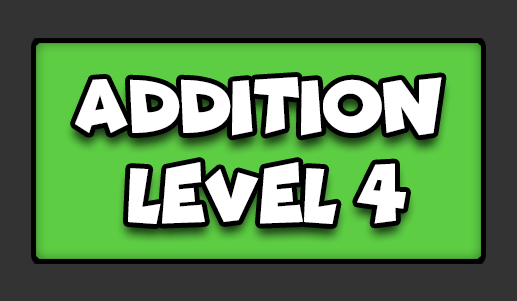
<style>
.page{position:relative;width:517px;height:301px;background:#333333}
.page>*{position:absolute;margin:0}
.t1{font:77.7px "Funhouse";color:#ffffff;scale:0.95 1}
</style>
<div class="page">
<p class="t1" style="left:75px;top:77px;width:367px;height:59px">ADDITION</p>
<p class="t1" style="left:128px;top:162px;width:278px;height:62px">LEVEL 4</p>
</div>
